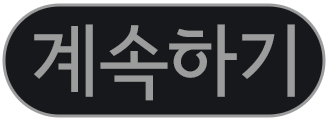
<style>
.page{position:relative;width:330px;height:120px;background:#17181c}
.page>*{position:absolute;margin:0}
.t1{font:79.3px "SeoulNamsanB";letter-spacing:-0.02em;color:#9c9c9c}
</style>
<div class="page">
<p class="t1" style="left:34px;top:24px;width:261px;height:77px">계속하기</p>
</div>
